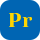
<style>
.page{position:relative;width:40px;height:40px;background:#0065b3}
.page>*{position:absolute;margin:0}
.t1{font:20px "YesevaOne-Regular";color:#ffd500}
</style>
<div class="page">
<p class="t1" style="left:9px;top:13px;width:23px;height:14px">Pr</p>
</div>
